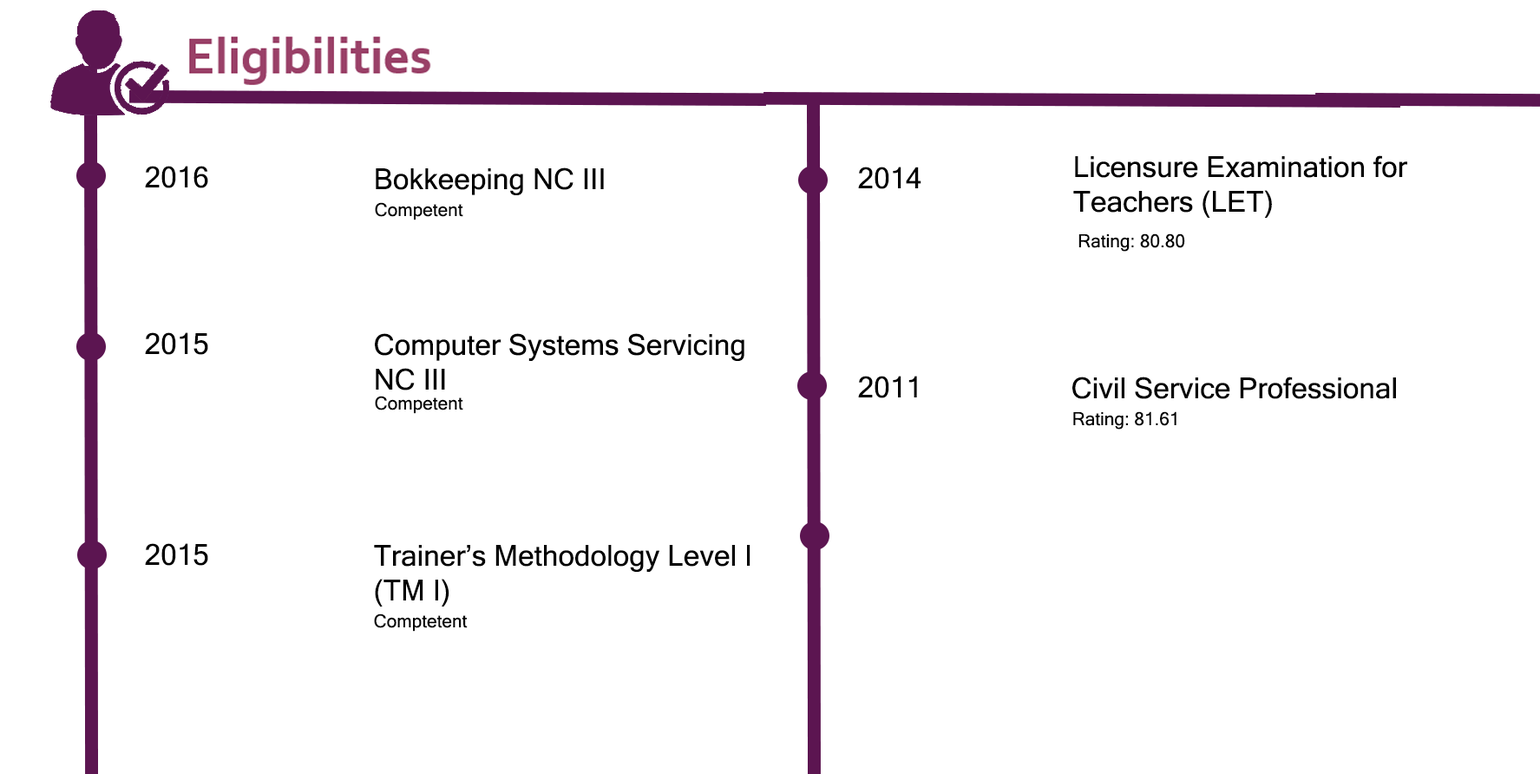
<style>
.page{position:relative;width:1540px;height:774px;background:#ffffff}
.page>*{position:absolute;margin:0}
.t1{font:28.9px "MicrosoftSansSerif";color:#000000}
.t2{font:18.1px "MicrosoftSansSerif";color:#000000}
</style>
<div class="page">
<p class="t1" style="left:1074px;top:155px;width:334px;height:63px">Licensure Examination for <br>Teachers (LET)</p>
<p class="t1" style="left:145px;top:166px;width:63px;height:22px">2016</p>
<p class="t1" style="left:376px;top:167px;width:228px;height:28px">Bokkeeping NC III</p>
<p class="t1" style="left:858px;top:167px;width:64px;height:22px">2014</p>
<p class="t2" style="left:375px;top:202px;width:88px;height:18px">Competent</p>
<p class="t2" style="left:1079px;top:233px;width:106px;height:19px">Rating: 80.80</p>
<p class="t1" style="left:145px;top:332px;width:63px;height:23px">2015</p>
<p class="t1" style="left:375px;top:333px;width:370px;height:58px">Computer Systems Servicing <br>NC III</p>
<p class="t1" style="left:858px;top:376px;width:59px;height:22px">2011</p>
<p class="t1" style="left:1073px;top:377px;width:323px;height:22px">Civil Service Professional</p>
<p class="t2" style="left:375px;top:396px;width:88px;height:18px">Competent</p>
<p class="t2" style="left:1074px;top:411px;width:103px;height:19px">Rating: 81.61</p>
<p class="t1" style="left:145px;top:543px;width:63px;height:23px">2015</p>
<p class="t1" style="left:374px;top:545px;width:377px;height:62px">Trainer’s Methodology Level I <br>(TM I)</p>
<p class="t2" style="left:374px;top:614px;width:94px;height:18px">Comptetent</p>
</div>
